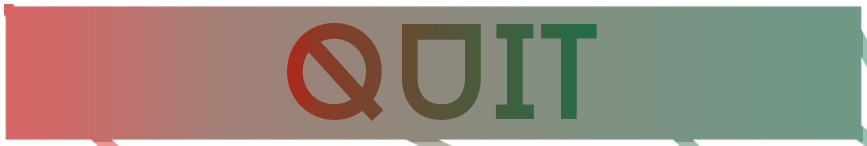
<style>
.page{position:relative;width:867px;height:146px}
.page>*{position:absolute;margin:0}
.t1{font:135.6px "BaronNeue"}
</style>
<div class="page">
<p class="t1" style="left:287px;top:23px;width:310px;height:98px">QUITT</p>
</div>
